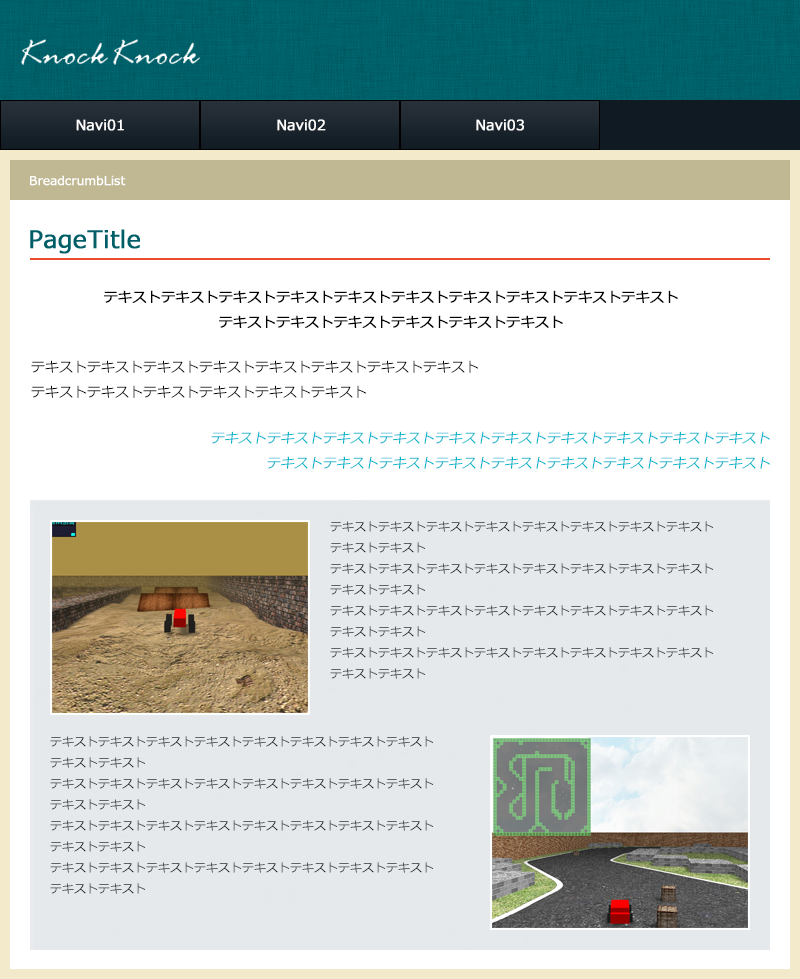
<style>
.page{position:relative;width:800px;height:979px;background:#ffffff}
.page>*{position:absolute;margin:0}
.t1{font:14px "Meiryo";color:#ffffff;font-weight:bold}
.t2{font:12px "Meiryo";color:#ffffff;font-weight:bold}
.t3{font:14px "Meiryo";color:#000000;font-weight:bold}
.t4{font:14px "Meiryo";color:#000000}
.t5{font:14px "Meiryo";color:#00b4cb;font-style:italic}
.t6{font:12px "Meiryo"}
</style>
<div class="page">
<p class="t1" style="left:76px;top:119px;width:48px;height:12px">Navi01</p>
<p class="t1" style="left:277px;top:119px;width:49px;height:12px">Navi02</p>
<p class="t1" style="left:476px;top:119px;width:48px;height:12px">Navi03</p>
<p class="t2" style="left:30px;top:175px;width:96px;height:11px">BreadcrumbList</p>
<p class="t3" style="left:104px;top:290px;width:574px;height:38px;text-align:center">テキストテキストテキストテキストテキストテキストテキストテキストテキストテキスト<br>テキストテキストテキストテキストテキストテキスト</p>
<p class="t4" style="left:31px;top:360px;width:448px;height:38px">テキストテキストテキストテキストテキストテキストテキストテキスト<br>テキストテキストテキストテキストテキストテキスト</p>
<p class="t5" style="left:211px;top:431px;width:559px;height:38px;text-align:right">テキストテキストテキストテキストテキストテキストテキストテキストテキストテキスト<br>テキストテキストテキストテキストテキストテキストテキストテキストテキスト</p>
<p class="t6" style="left:330px;top:521px;width:384px;height:158px">テキストテキストテキストテキストテキストテキストテキストテキスト<br>テキストテキスト<br>テキストテキストテキストテキストテキストテキストテキストテキスト<br>テキストテキスト<br>テキストテキストテキストテキストテキストテキストテキストテキスト<br>テキストテキスト<br>テキストテキストテキストテキストテキストテキストテキストテキスト<br>テキストテキスト</p>
<p class="t6" style="left:50px;top:736px;width:384px;height:158px">テキストテキストテキストテキストテキストテキストテキストテキスト<br>テキストテキスト<br>テキストテキストテキストテキストテキストテキストテキストテキスト<br>テキストテキスト<br>テキストテキストテキストテキストテキストテキストテキストテキスト<br>テキストテキスト<br>テキストテキストテキストテキストテキストテキストテキストテキスト<br>テキストテキスト</p>
</div>
